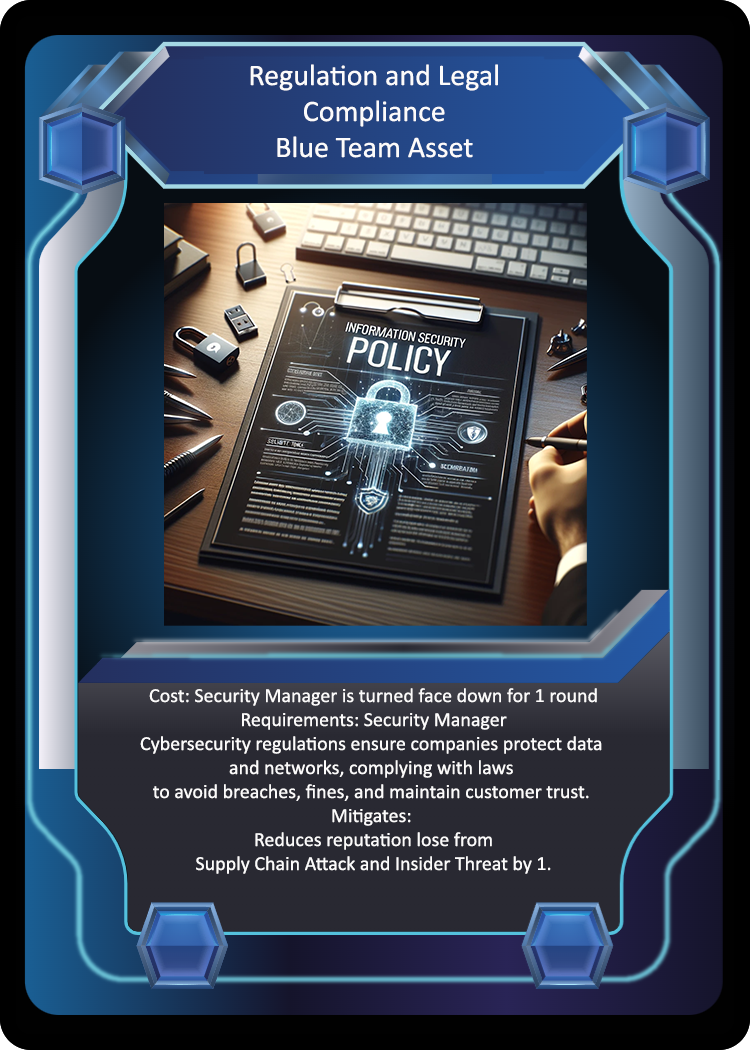
<style>
.page{position:relative;width:750px;height:1050px}
.page>*{position:absolute;margin:0}
.t1{font:30px "Calibri";color:#fcfbfb}
.t2{font:20px "Calibri";color:#fcfbfb}
</style>
<div class="page">
<p class="t1" style="left:250px;top:64px;width:248px;height:94px;text-align:center">Regulation and Legal<br>Compliance<br>Blue Team Asset</p>
<p class="t2" style="left:140px;top:688px;width:462px;height:186px;text-align:center">Cost: Security Manager is turned face down for 1 round<br>Requirements: Security Manager<br>Cybersecurity regulations ensure companies protect data <br>and networks, complying with laws <br>to avoid breaches, fines, and maintain customer trust. <br>Mitigates: <br>Reduces reputation lose from<br>Supply Chain Attack and Insider Threat by 1.</p>
</div>
